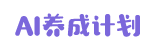
<style>
.page{position:relative;width:153px;height:46px;background:#ffffff}
.page>*{position:absolute;margin:0}
.t1{font:25px "MF-SuBai(Noncommercial)-Regular";color:#7b67db}
</style>
<div class="page">
<p class="t1" style="left:15px;top:13px;width:125px;height:24px">AI养成计划</p>
</div>
